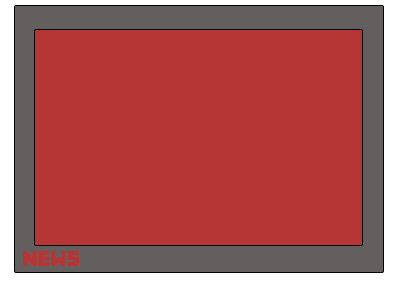
<style>
.page{position:relative;width:400px;height:285px;background:#b63636}
.page>*{position:absolute;margin:0}
.t1{font:19px "Minecrafter";color:#b63636}
</style>
<div class="page">
<p class="t1" style="left:23px;top:251px;width:57px;height:15px">News</p>
</div>
